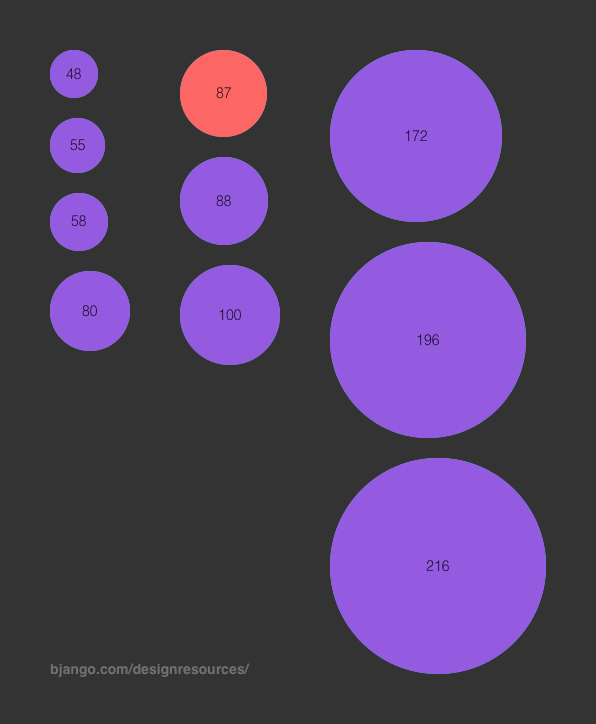
<style>
.page{position:relative;width:596px;height:724px;background:#333333}
.page>*{position:absolute;margin:0}
.t1{font:14px "Helvetica-Light";color:#1e122d}
.t2{font:14px "Helvetica-Light"}
.t3{font:14px "Helvetica-Bold";color:#808080}
</style>
<div class="page">
<p class="t1" style="left:66px;top:68px;width:15px;height:12px">48</p>
<p class="t2" style="left:216px;top:87px;width:15px;height:12px">87</p>
<p class="t1" style="left:405px;top:130px;width:22px;height:11px">172</p>
<p class="t1" style="left:70px;top:139px;width:15px;height:12px">55</p>
<p class="t1" style="left:216px;top:195px;width:15px;height:12px">88</p>
<p class="t1" style="left:71px;top:215px;width:15px;height:12px">58</p>
<p class="t2" style="left:82px;top:305px;width:15px;height:12px">80</p>
<p class="t1" style="left:219px;top:309px;width:22px;height:12px">100</p>
<p class="t1" style="left:417px;top:334px;width:22px;height:12px">196</p>
<p class="t1" style="left:426px;top:560px;width:23px;height:12px">216</p>
<p class="t3" style="left:50px;top:663px;width:200px;height:14px">bjango.com/designresources/</p>
</div>
